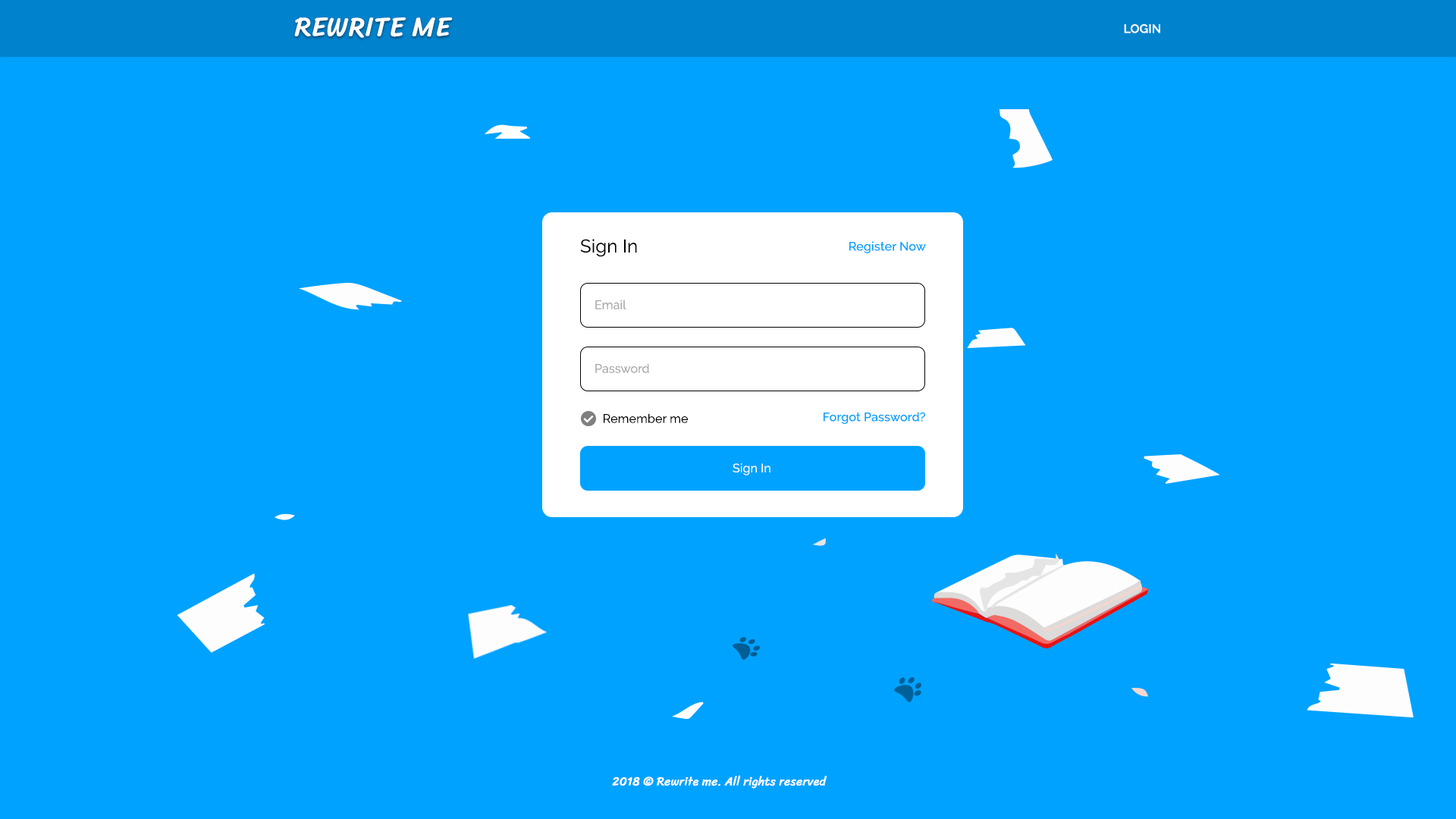
<style>
.page{position:relative;width:1456px;height:819px;background:#00a2ff}
.page>*{position:absolute;margin:0}
.t1{font:27.3px "SrirachaCyrillic";letter-spacing:0.01em;color:#ffffff}
.t2{font:12.1px "Raleway-SemiBold";letter-spacing:0.01em;color:#ffffff}
.t3{font:18.2px "Raleway-Regular";letter-spacing:0.01em;color:#000000}
.t4{font:12.1px "Raleway-Medium";letter-spacing:0.01em;color:#00a2ff}
.t5{font:12.1px "Raleway-Regular";letter-spacing:0.01em;color:#a3a3a3}
.t6{font:12.1px "Raleway-Regular";letter-spacing:0.01em;color:#000000}
.t7{font:12.1px "Raleway-Regular";letter-spacing:0.01em;color:#ffffff}
.t8{font:12.1px "SrirachaCyrillic";letter-spacing:0.01em;color:#ffffff}
</style>
<div class="page">
<p class="t1" style="left:294px;top:17px;width:159px;height:21px">REWRITE ME</p>
<p class="t2" style="left:1124px;top:24px;width:36px;height:9px">LOGIN</p>
<p class="t3" style="left:580px;top:239px;width:57px;height:18px">Sign In</p>
<p class="t4" style="left:849px;top:241px;width:77px;height:12px">Register Now</p>
<p class="t5" style="left:595px;top:300px;width:31px;height:9px">Email</p>
<p class="t5" style="left:595px;top:363px;width:54px;height:10px">Password</p>
<p class="t6" style="left:604px;top:413px;width:84px;height:10px">Remember me</p>
<p class="t4" style="left:824px;top:412px;width:101px;height:12px">Forgot Password?</p>
<p class="t7" style="left:733px;top:463px;width:37px;height:12px">Sign In</p>
<p class="t8" style="left:612px;top:775px;width:215px;height:14px">2018 © Rewrite me. All rights reserved</p>
</div>
